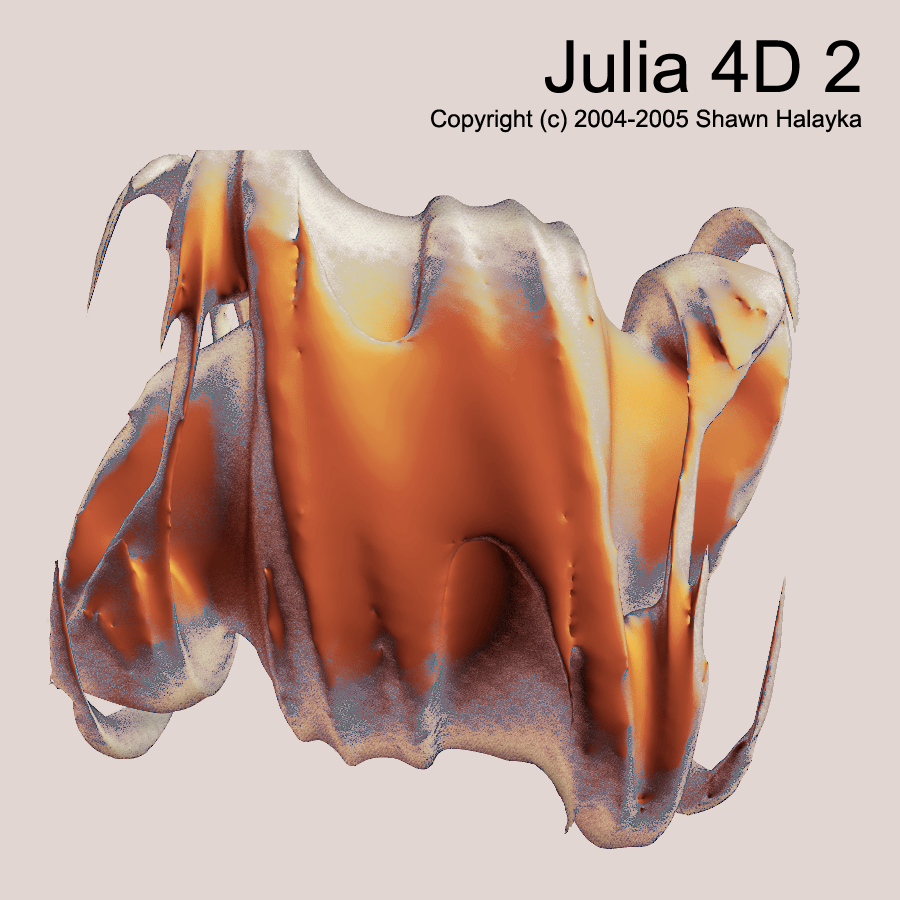
<style>
.page{position:relative;width:900px;height:900px;background:#e1d6d1}
.page>*{position:absolute;margin:0}
.t1{font:72px "ArialMT";color:#000000}
.t2{font:24px "ArialMT";color:#000000}
</style>
<div class="page">
<p class="t1" style="left:545px;top:40px;width:315px;height:53px">Julia 4D 2</p>
<p class="t2" style="left:431px;top:109px;width:431px;height:24px">Copyright (c) 2004-2005 Shawn Halayka</p>
</div>
